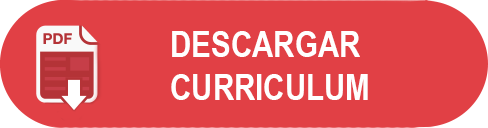
<style>
.page{position:relative;width:488px;height:128px;background:#e14045}
.page>*{position:absolute;margin:0}
.t1{font:36px "ArialNarrow-Bold";color:#ffffff}
.t2{font:30px "ArialMT";color:#ffffff}
</style>
<div class="page">
<p class="t1" style="left:171px;top:31px;width:197px;height:69px"><span class="t2"> </span>DESCARGAR <br> CURRICULUM</p>
</div>
